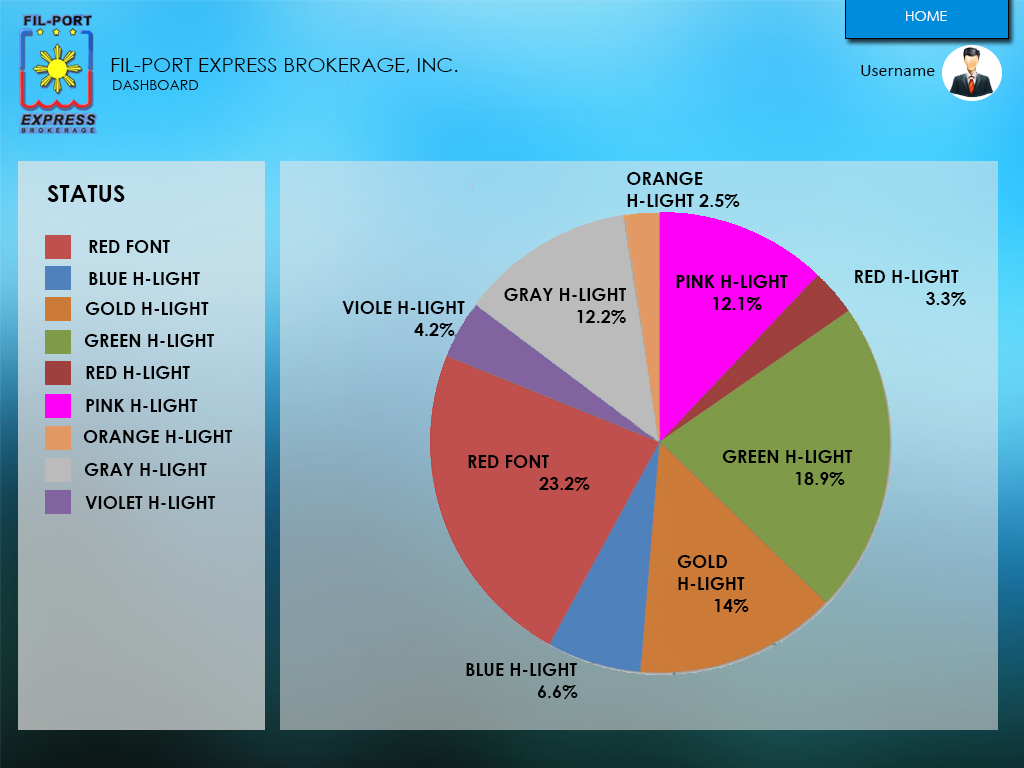
<style>
.page{position:relative;width:1024px;height:768px}
.page>*{position:absolute;margin:0}
.t1{font:20.3px "CenturyGothic";color:#000000;text-transform:uppercase}
.t2{font:18px/30.5px "Calibri";color:#000000}
.t3{font:14px "CenturyGothic";color:#000000;text-transform:uppercase}
.t4{font:18px/11px "CenturyGothic-Bold";color:#000000;text-transform:uppercase}
.t5{font:24px "CenturyGothic-Bold";color:#000000;text-transform:uppercase}
.t6{font:18px "CenturyGothic-Bold";color:#000000;text-transform:uppercase}
.t7{font:18px/11px "CenturyGothic-Bold";color:#010000;text-transform:uppercase}
</style>
<div class="page">
<p class="t1" style="left:111px;top:58px;width:347px;height:15px">FIL-PORT EXPRESS BROKERAGE, INC.</p>
<p class="t2" style="left:861px;top:65px;width:74px;height:11px">Username<br>vvvvv</p>
<p class="t3" style="left:113px;top:80px;width:85px;height:10px">dashboard</p>
<p class="t4" style="left:627px;top:172px;width:113px;height:36px">orange <br><br>H-light 2.5%</p>
<p class="t5" style="left:47px;top:185px;width:78px;height:17px">Status</p>
<p class="t6" style="left:89px;top:240px;width:81px;height:13px">Red Font</p>
<p class="t4" style="left:855px;top:270px;width:111px;height:36px">Red H-light<br> <br>  3.3%</p>
<p class="t6" style="left:89px;top:272px;width:111px;height:13px">blue h-light</p>
<p class="t7" style="left:504px;top:288px;width:123px;height:36px">GRAY H-light<br>  <br>  12.2%</p>
<p class="t6" style="left:85px;top:302px;width:124px;height:13px">gold h-light</p>
<p class="t4" style="left:342px;top:301px;width:123px;height:36px">Viole H-light<br>  <br>  4.2%</p>
<p class="t6" style="left:84px;top:334px;width:131px;height:13px">green h-light</p>
<p class="t6" style="left:86px;top:366px;width:104px;height:13px">red h-light</p>
<p class="t6" style="left:86px;top:399px;width:112px;height:13px">pink h-light</p>
<p class="t6" style="left:83px;top:430px;width:150px;height:13px">orange h-light</p>
<p class="t4" style="left:468px;top:455px;width:122px;height:36px">Red FONT<br><br>  23.2%</p>
<p class="t4" style="left:722px;top:450px;width:131px;height:36px">green H-light<br> <br>  18.9%</p>
<p class="t6" style="left:84px;top:463px;width:123px;height:13px">gray h-light</p>
<p class="t6" style="left:85px;top:496px;width:131px;height:13px">violet h-light</p>
<p class="t4" style="left:677px;top:555px;width:72px;height:58px">gold <br><br>h-light<br><br> 14%</p>
<p class="t4" style="left:466px;top:663px;width:112px;height:36px">BLue H-light<br>  <br>  6.6%</p>
</div>
